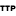
<style>
.page{position:relative;width:16px;height:16px;background:#ffffff}
.page>*{position:absolute;margin:0}
.t1{font:7.7px "HelveticaNeueLTStd-Blk";color:#000000}
</style>
<div class="page">
<p class="t1" style="left:0px;top:5px;width:16px;height:6px">TTP</p>
</div>
